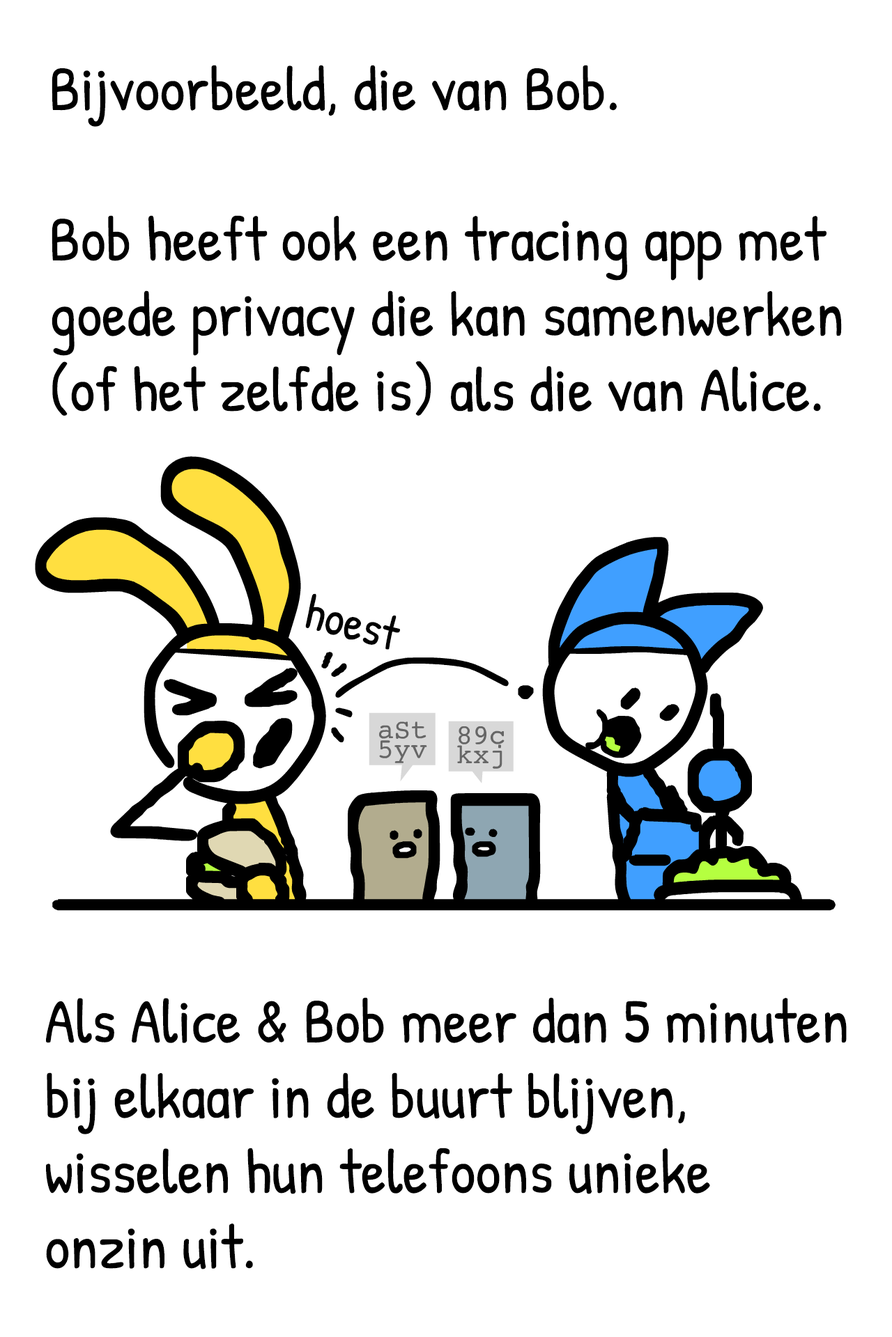
<style>
.page{position:relative;width:892px;height:1337px;background:#ffffff}
.page>*{position:absolute;margin:0}
.t1{font:62.7px "PatrickHand-Regular";color:#000000}
.t2{font:48.8px "PatrickHand-Regular";color:#000000}
</style>
<div class="page">
<p class="t1" style="left:52px;top:65px;width:789px;height:351px">Bijvoorbeeld, die van Bob.<br><br>Bob heeft ook een tracing app met<br>goede privacy die kan samenwerken<br>(of het zelfde is) als die van Alice.</p>
<p class="t2" style="left:305px;top:593px;width:95px;height:57px;rotate:15deg">hoest</p>
<p class="t1" style="left:46px;top:997px;width:800px;height:273px">Als Alice &amp; Bob meer dan 5 minuten<br>bij elkaar in de buurt blijven,<br>wisselen hun telefoons unieke<br>onzin uit.</p>
</div>
